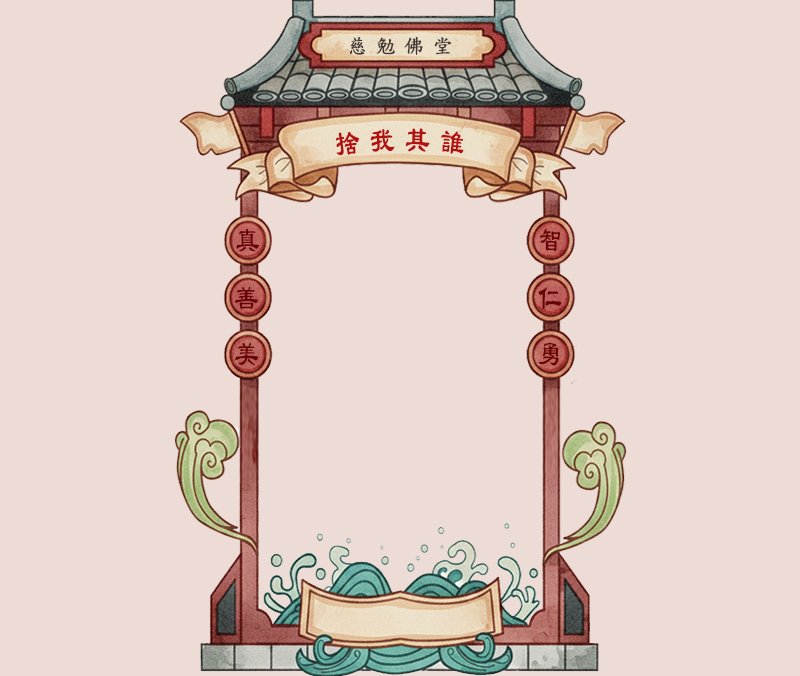
<style>
.page{position:relative;width:800px;height:676px;background:#eddbd5}
.page>*{position:absolute;margin:0}
.t1{font:20px "DFKaiShu-SB-Estd-BF";letter-spacing:0.4em;color:#443834;font-weight:bold}
.t2{font:36px "LiSu";letter-spacing:0.4em;color:#b51010;scale:0.67 1}
.t3{font:36px "LiSu";letter-spacing:0.4em;color:#680404;scale:0.67 1}
</style>
<div class="page">
<p class="t1" style="left:350px;top:37px;width:102px;height:18px">慈勉佛堂</p>
<p class="t2" style="left:336px;top:128px;width:128px;height:28px">捨我其誰</p>
<p class="t3" style="left:236px;top:228px;width:23px;height:24px">真</p>
<p class="t3" style="left:540px;top:228px;width:21px;height:24px">智</p>
<p class="t3" style="left:235px;top:286px;width:23px;height:23px">善</p>
<p class="t3" style="left:538px;top:287px;width:24px;height:22px">仁</p>
<p class="t3" style="left:235px;top:342px;width:24px;height:24px">美</p>
<p class="t3" style="left:538px;top:342px;width:21px;height:24px">勇</p>
</div>
